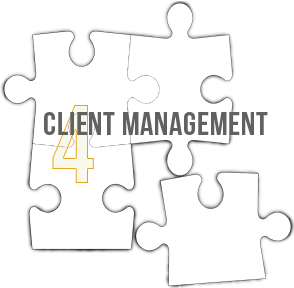
<style>
.page{position:relative;width:294px;height:288px;background:#ffffff}
.page>*{position:absolute;margin:0}
.t1{font:33px "BebasNeue";letter-spacing:0.022em;color:#616161}
</style>
<div class="page">
<p class="t1" style="left:44px;top:112px;width:224px;height:23px">CLIENT MANAGEMENT</p>
</div>
